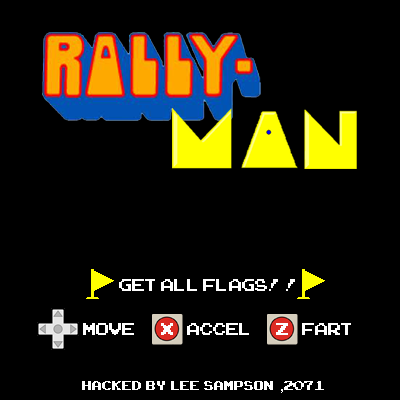
<style>
.page{position:relative;width:400px;height:400px;background:#000000}
.page>*{position:absolute;margin:0}
.t1{font:24px "ArcadeClassic";color:#fefefe}
.t2{font:18px "ArcadeClassic";color:#fefefe}
.t3{font:18px "ArialMT";color:#fefefe}
</style>
<div class="page">
<p class="t1" style="left:119px;top:279px;width:176px;height:12px">Get All Flags!!</p>
<p class="t1" style="left:83px;top:323px;width:51px;height:12px">Move</p>
<p class="t1" style="left:161px;top:323px;width:12px;height:12px">X</p>
<p class="t1" style="left:187px;top:323px;width:62px;height:12px">Accel.</p>
<p class="t1" style="left:276px;top:323px;width:12px;height:12px">Z</p>
<p class="t1" style="left:302px;top:323px;width:49px;height:12px">Fart</p>
<p class="t2" style="left:82px;top:381px;width:242px;height:12px">@Hacked  by  lee  sampson,,,.@@@<span class="t3"> ,</span>2071</p>
</div>
